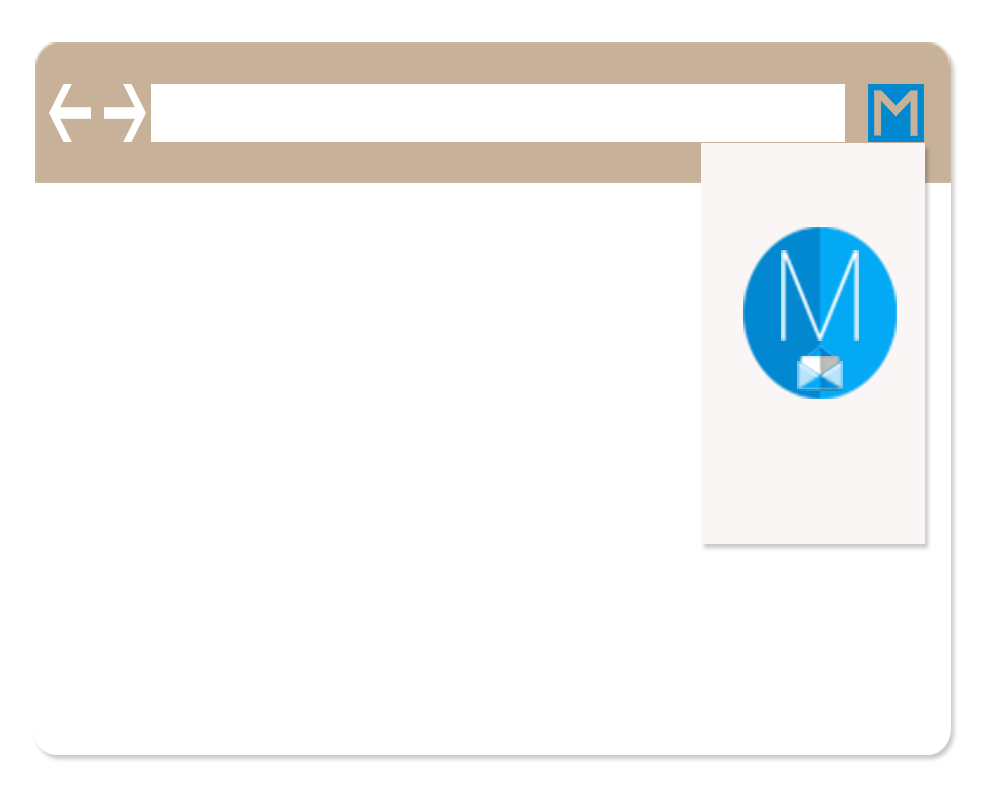
<style>
.page{position:relative;width:1000px;height:800px;background:#ffffff}
.page>*{position:absolute;margin:0}
.t1{font:124px "Roboto-Thin";color:#ffffff;scale:0.93 1}
</style>
<div class="page">
<p class="t1" style="left:781px;top:250px;width:78px;height:91px">M</p>
</div>
